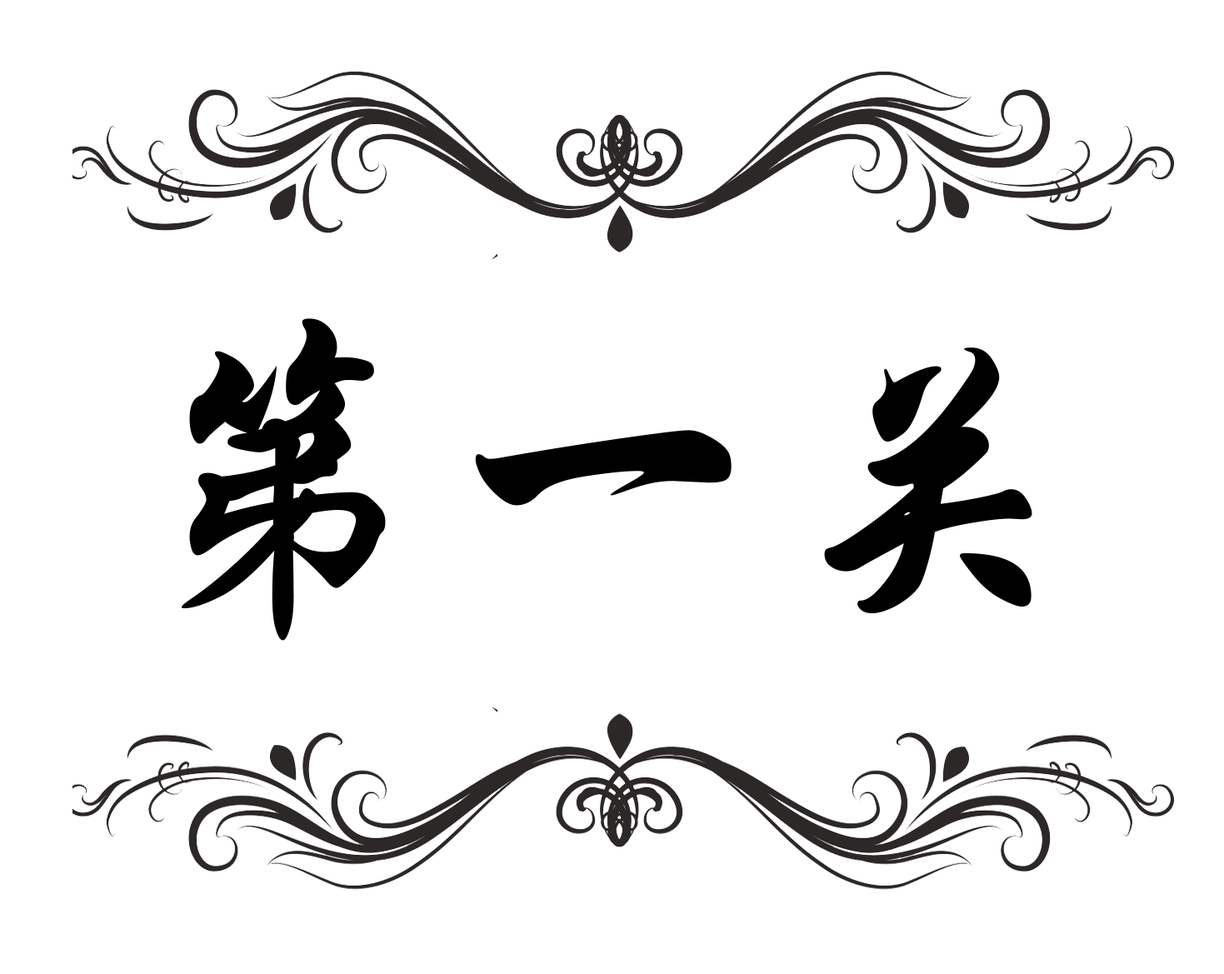
<style>
.page{position:relative;width:1224px;height:974px;background:#ffffff}
.page>*{position:absolute;margin:0}
.t1{font:333.3px "STXingkai";color:#000000}
</style>
<div class="page">
<p class="t1" style="left:182px;top:318px;width:850px;height:323px">第一关</p>
</div>
